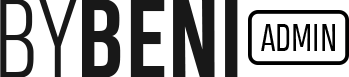
<style>
.page{position:relative;width:349px;height:77px;background:#ffffff}
.page>*{position:absolute;margin:0}
.t1{font:106px "HeadingProTrial-Bold";color:#181818;text-transform:uppercase}
.t2{font:106px "HeadingProTrial-Light";color:#181818;text-transform:uppercase}
.t3{font:36px "HeadingProTrial-Book";color:#000000;text-transform:uppercase}
.t4{font:18px "BlackLabel-Light";color:#ffffff;text-transform:uppercase}
</style>
<div class="page">
<p class="t1" style="left:0px;top:0px;width:238px;height:78px"><span class="t2">BY</span>BENI</p>
<p class="t3" style="left:261px;top:24px;width:74px;height:27px"><span class="t4"><br></span>ADMIN</p>
</div>
